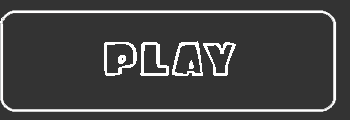
<style>
.page{position:relative;width:350px;height:120px;background:#333333}
.page>*{position:absolute;margin:0}
.t1{font:72px "iceagefont";color:#ffffff}
</style>
<div class="page">
<p class="t1" style="left:104px;top:41px;width:132px;height:35px">PLAY</p>
</div>
